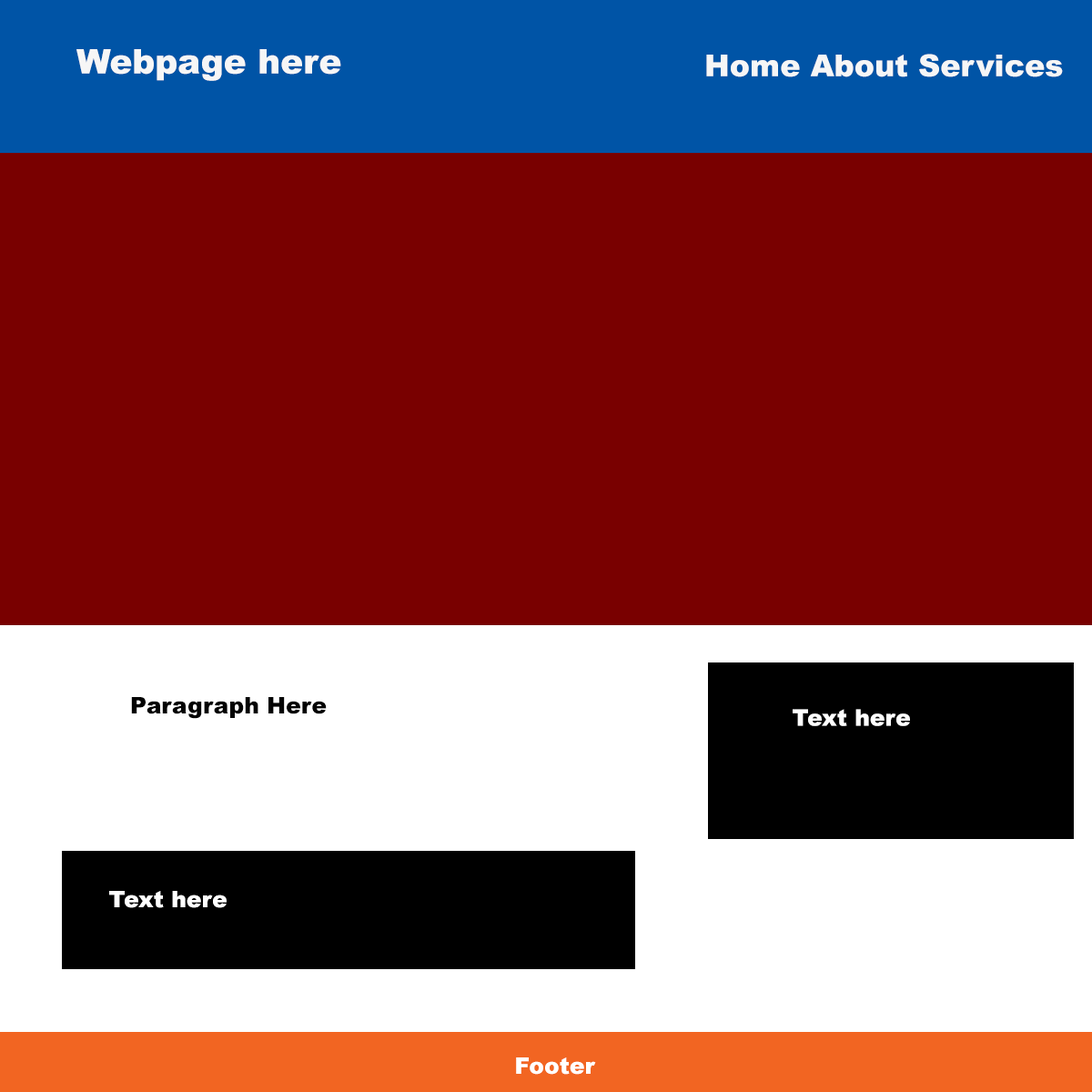
<style>
.page{position:relative;width:1092px;height:1092px;background:#790000}
.page>*{position:absolute;margin:0}
.t1{font:34.1px "Arial-Black";color:#f6f6f6}
.t2{font:30.3px "Arial-Black";color:#f6f6f6}
.t3{font:22.7px "Arial-Black";color:#030303}
.t4{font:22.7px "Arial-Black";color:#ffffff}
</style>
<div class="page">
<p class="t1" style="left:76px;top:49px;width:265px;height:32px">Webpage here</p>
<p class="t2" style="left:706px;top:54px;width:357px;height:23px">Home About Services</p>
<p class="t3" style="left:131px;top:697px;width:196px;height:22px">Paragraph Here</p>
<p class="t4" style="left:793px;top:709px;width:117px;height:17px">Text here</p>
<p class="t4" style="left:109px;top:891px;width:118px;height:17px">Text here</p>
<p class="t4" style="left:516px;top:1057px;width:80px;height:18px">Footer</p>
</div>
